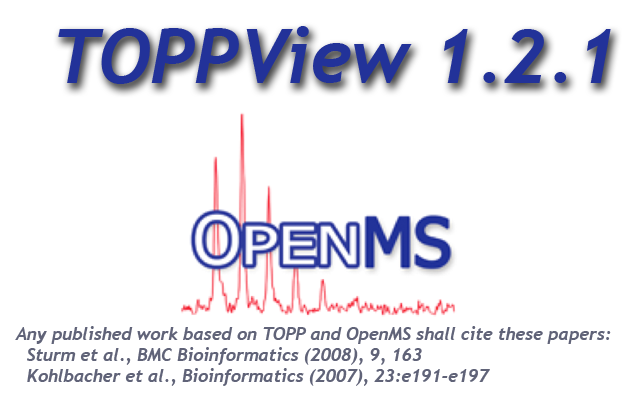
<style>
.page{position:relative;width:640px;height:400px;background:#ffffff}
.page>*{position:absolute;margin:0}
.t1{font:75px "Trebuchet-BoldItalic";color:#223299}
.t2{font:17.5px "Trebuchet-BoldItalic";color:#606378}
</style>
<div class="page">
<p class="t1" style="left:58px;top:26px;width:553px;height:58px">TOPPView 1.2.1</p>
<p class="t2" style="left:15px;top:326px;width:596px;height:60px">Any published work based on TOPP and OpenMS shall cite these papers:<br>  Sturm et al., BMC Bioinformatics (2008), 9, 163<br>  Kohlbacher et al., Bioinformatics (2007), 23:e191-e197</p>
</div>
